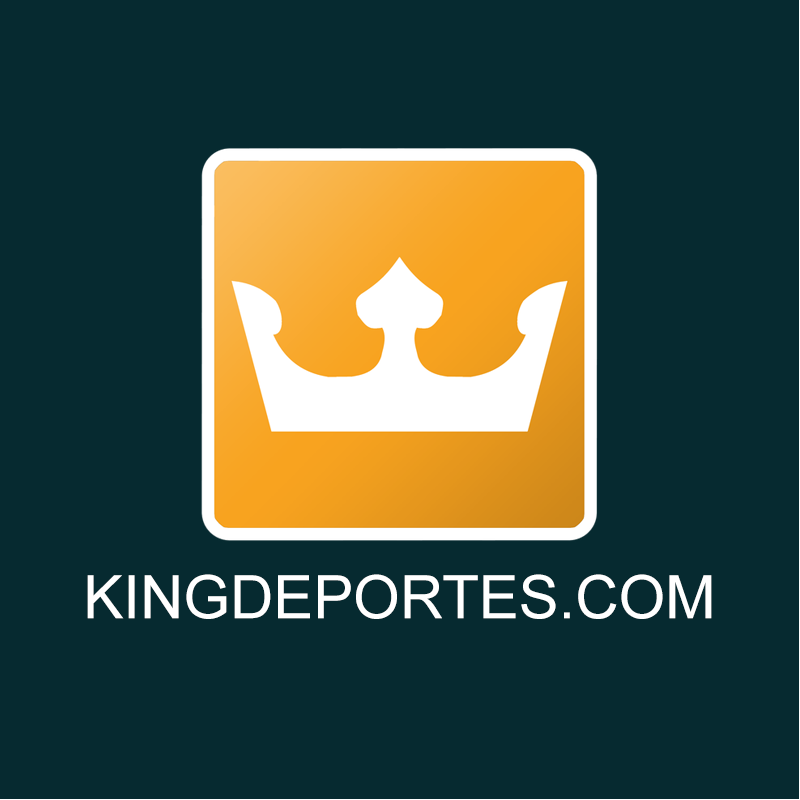
<style>
.page{position:relative;width:800px;height:800px;background:#062a30}
.page>*{position:absolute;margin:0}
.t1{font:60px "ArialMT";color:#ffffff}
</style>
<div class="page">
<p class="t1" style="left:87px;top:574px;width:625px;height:45px">KINGDEPORTES.COM</p>
</div>
